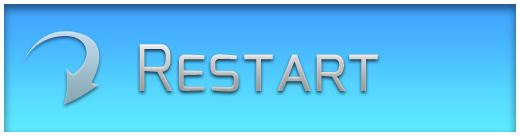
<style>
.page{position:relative;width:520px;height:136px}
.page>*{position:absolute;margin:0}
.t1{font:64px "Exo-Regular";font-variant:small-caps}
</style>
<div class="page">
<p class="t1" style="left:139px;top:44px;width:239px;height:48px">Restart</p>
</div>
